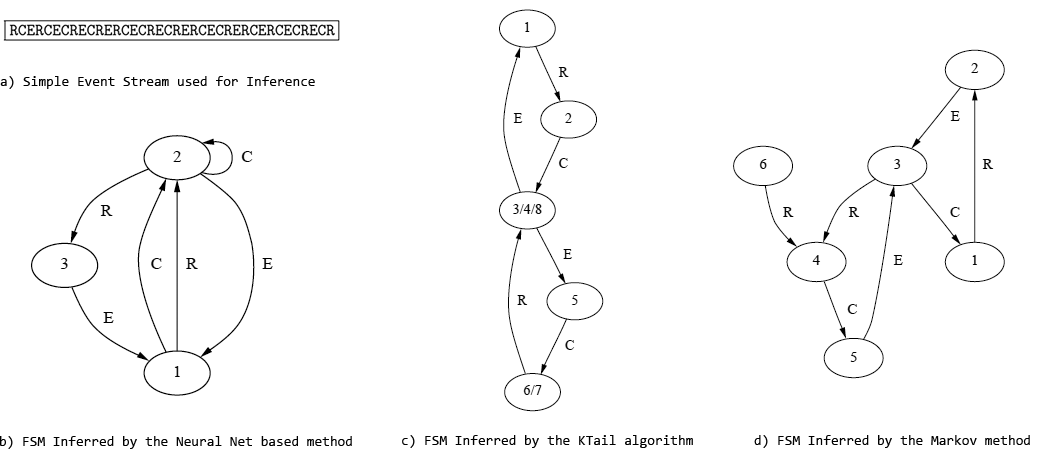
<style>
.page{position:relative;width:1044px;height:454px;background:#ffffff}
.page>*{position:absolute;margin:0}
.t1{font:14px "Consolas";color:#000000}
</style>
<div class="page">
<p class="t1" style="left:0px;top:76px;width:315px;height:13px">a) Simple Event Stream used for Inference</p>
<p class="t1" style="left:0px;top:436px;width:352px;height:13px">b) FSM Inferred by the Neural Net based method</p>
<p class="t1" style="left:402px;top:435px;width:291px;height:13px">c) FSM Inferred by the KTail algorithm</p>
<p class="t1" style="left:754px;top:435px;width:276px;height:13px">d) FSM Inferred by the Markov method</p>
</div>
